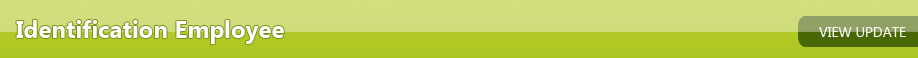
<style>
.page{position:relative;width:918px;height:58px}
.page>*{position:absolute;margin:0}
.t1{font:24px "SegoeUI-Bold";color:#fefefe}
.t2{font:14px "SegoeUI";color:#f6f7f1}
</style>
<div class="page">
<p class="t1" style="left:16px;top:20px;width:268px;height:24px">Identification Employee</p>
<p class="t2" style="left:819px;top:27px;width:87px;height:10px">VIEW UPDATE</p>
</div>
